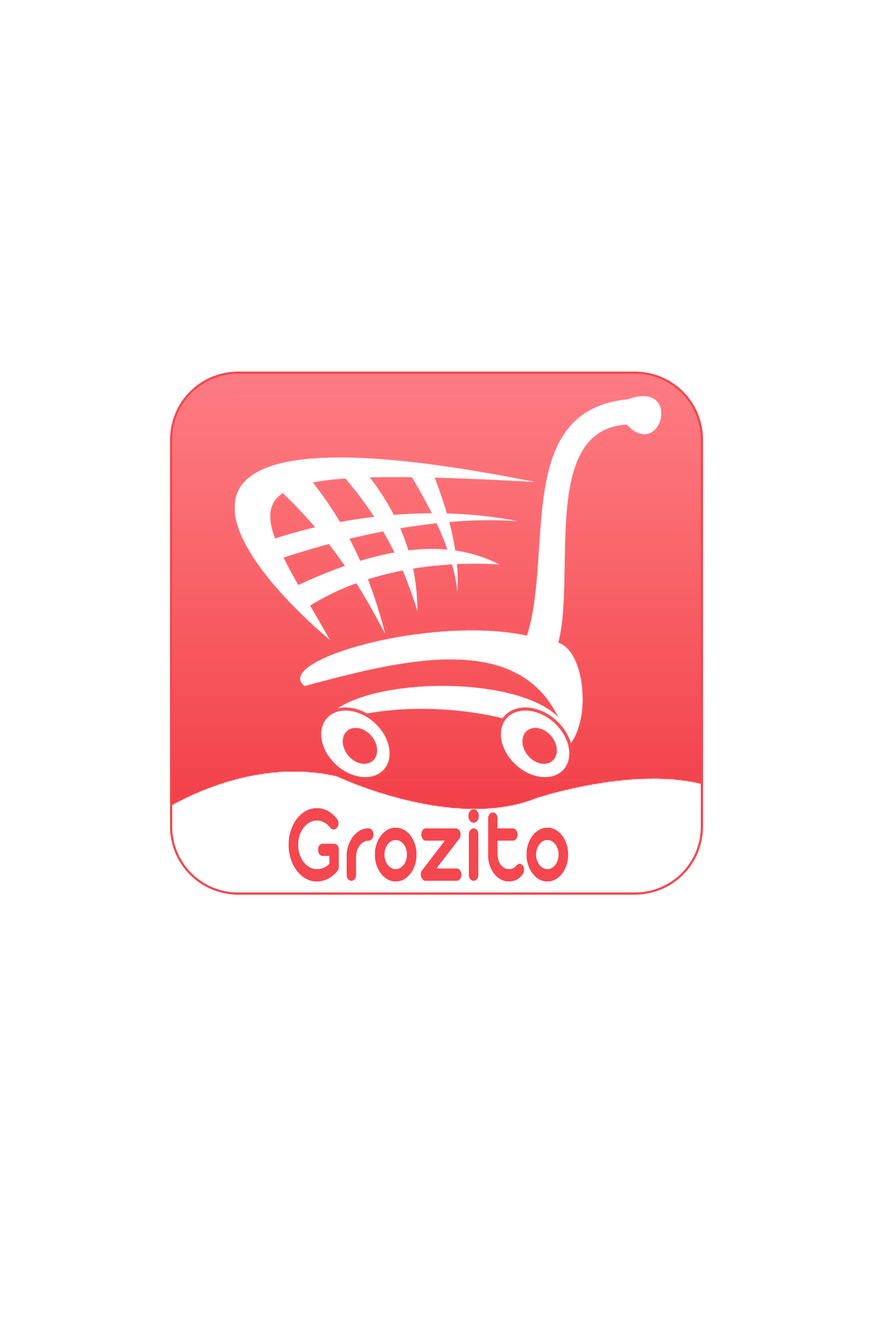
<style>
.page{position:relative;width:892px;height:1337px;background:#ffffff}
.page>*{position:absolute;margin:0}
.t1{font:112.6px "AristotelicaDisplayTrial-DmBd";color:#f4474f}
</style>
<div class="page">
<p class="t1" style="left:288px;top:808px;width:280px;height:74px">Grozito</p>
</div>
